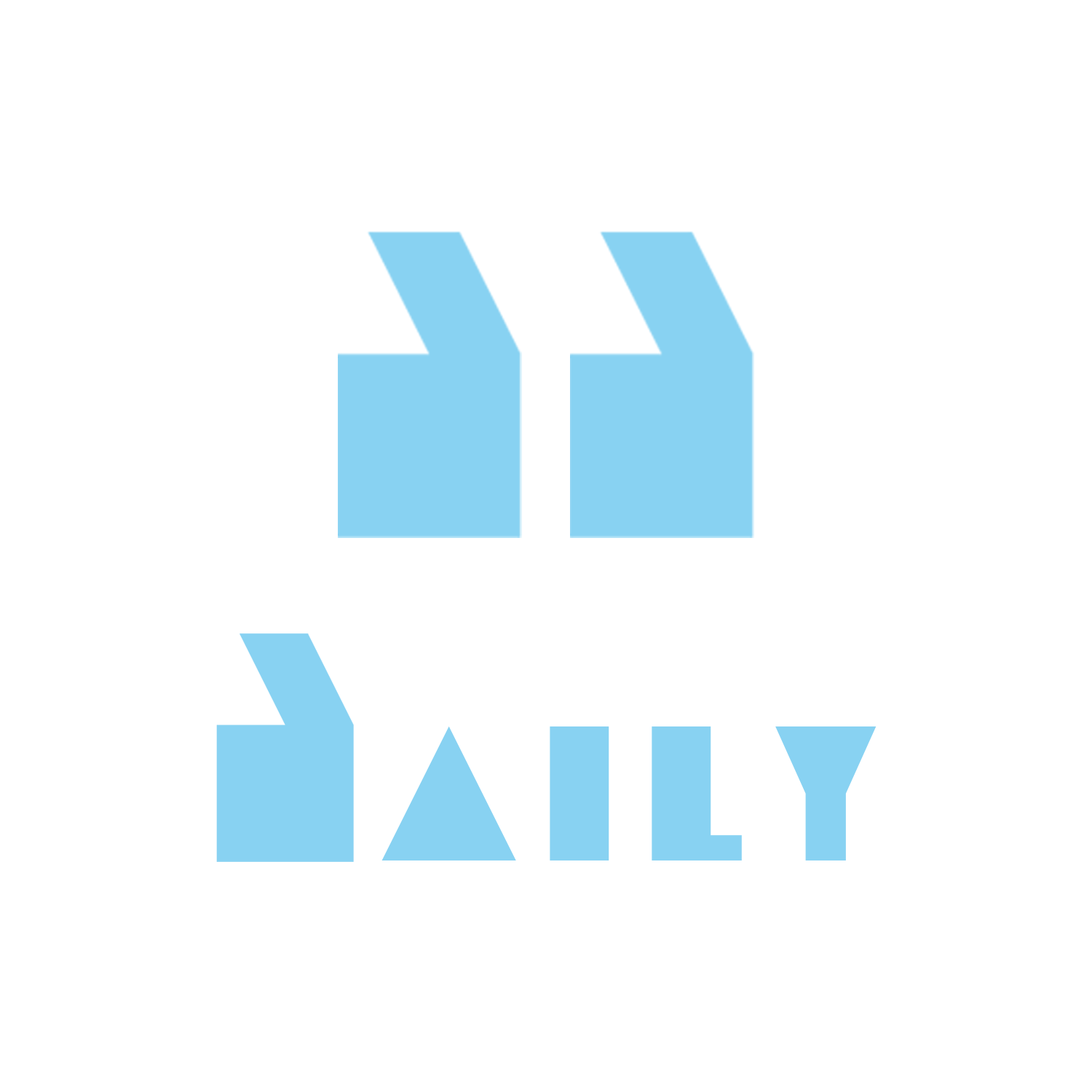
<style>
.page{position:relative;width:1092px;height:1092px;background:#ffffff}
.page>*{position:absolute;margin:0}
.t1{font:167.5px "Neogeo-Regular";letter-spacing:0.1em;color:#88d2f2}
</style>
<div class="page">
<p class="t1" style="left:381px;top:726px;width:496px;height:134px">aily</p>
</div>
